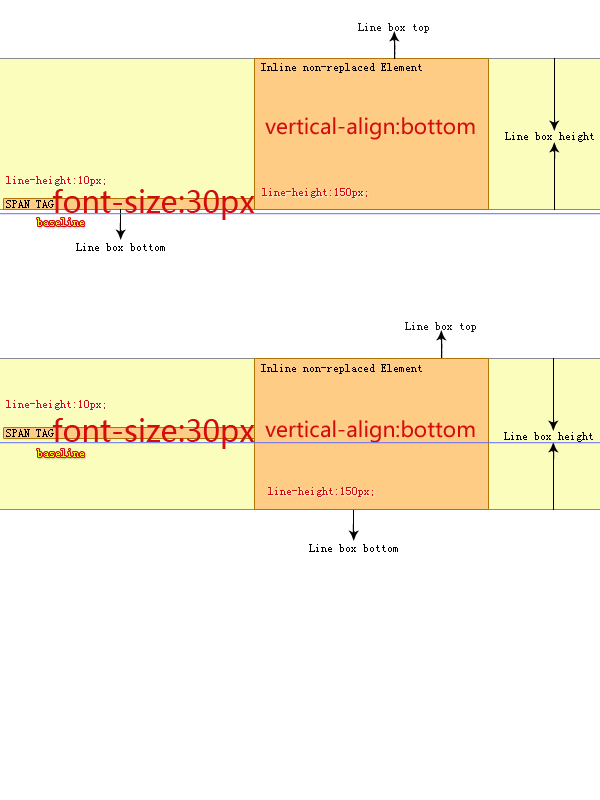
<style>
.page{position:relative;width:600px;height:800px;background:#ffffff}
.page>*{position:absolute;margin:0}
.t1{font:12px "SimSun";color:#000000}
.t2{font:21px "MicrosoftYaHei";color:#d30d0d}
.t3{font:12px "SimSun";color:#d30d0d}
.t4{font:30px "MicrosoftYaHei";color:#d30d0d}
.t5{font:12px "SimSun";color:#f6ff00}
</style>
<div class="page">
<p class="t1" style="left:261px;top:63px;width:161px;height:10px">Inline non-replaced Element</p>
<p class="t2" style="left:265px;top:117px;width:210px;height:23px">vertical-align:bottom</p>
<p class="t1" style="left:505px;top:132px;width:89px;height:10px">Line box height</p>
<p class="t3" style="left:6px;top:176px;width:99px;height:10px">line-height:10px;</p>
<p class="t4" style="left:52px;top:189px;width:203px;height:31px">font-size:30px</p>
<p class="t3" style="left:262px;top:188px;width:105px;height:10px">line-height:150px;</p>
<p class="t1" style="left:6px;top:200px;width:48px;height:8px">SPAN TAG</p>
<p class="t5" style="left:37px;top:218px;width:47px;height:8px">baseline</p>
<p class="t1" style="left:261px;top:364px;width:161px;height:10px">Inline non-replaced Element</p>
<p class="t3" style="left:6px;top:400px;width:99px;height:10px">line-height:10px;</p>
<p class="t4" style="left:52px;top:418px;width:203px;height:31px">font-size:30px</p>
<p class="t2" style="left:265px;top:420px;width:210px;height:23px">vertical-align:bottom</p>
<p class="t1" style="left:6px;top:429px;width:48px;height:8px">SPAN TAG</p>
<p class="t1" style="left:504px;top:432px;width:89px;height:10px">Line box height</p>
<p class="t5" style="left:37px;top:449px;width:47px;height:8px">baseline</p>
<p class="t3" style="left:268px;top:487px;width:105px;height:10px">line-height:150px;</p>
</div>
